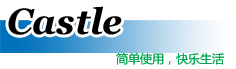
<style>
.page{position:relative;width:236px;height:69px;background:#ffffff}
.page>*{position:absolute;margin:0}
.t1{font:36px "Georgia-BoldItalic";color:#000000}
.t2{font:12px "MicrosoftYaHei";color:#00a651}
</style>
<div class="page">
<p class="t1" style="left:8px;top:6px;width:114px;height:29px">Castle</p>
<p class="t2" style="left:116px;top:52px;width:108px;height:13px">简单使用，快乐生活</p>
</div>
